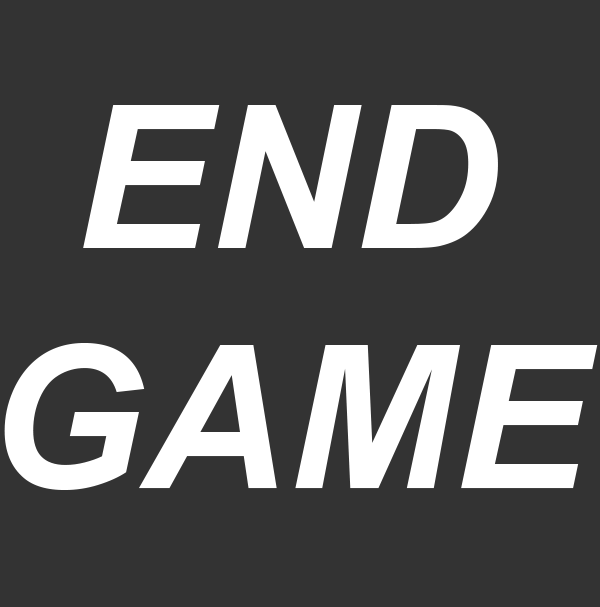
<style>
.page{position:relative;width:600px;height:607px;background:#333333}
.page>*{position:absolute;margin:0}
.t1{font:200px "Arial-BoldItalicMT";color:#ffffff}
</style>
<div class="page">
<p class="t1" style="left:4px;top:105px;width:594px;height:385px;text-align:center">END<br>GAME</p>
</div>
